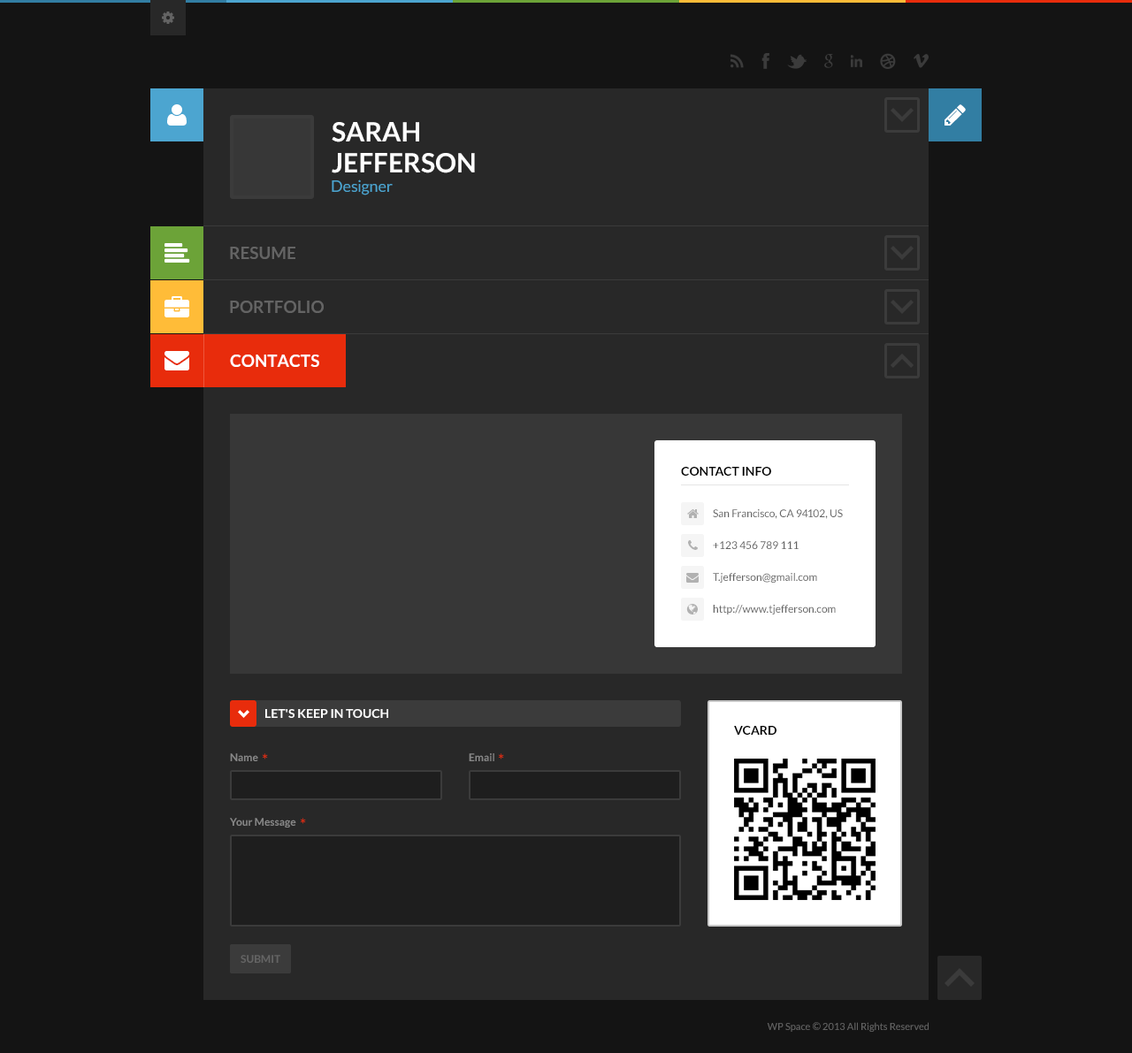
<style>
.page{position:relative;width:1132px;height:1053px;background:#141414}
.page>*{position:absolute;margin:0}
.t1{font:26.5px/31px "Lato-Bold";color:#ffffff;text-transform:uppercase}
.t2{font:15.9px "Lato-Regular";color:#4ca5d0}
.t3{font:16.8px "Lato-Bold";color:#646464;text-transform:uppercase}
.t4{font:16.8px "Lato-Bold";color:#ffffff;text-transform:uppercase}
.t5{font:12.4px "Lato-Bold";color:#000000;text-transform:uppercase}
.t6{font:10.6px/31.8px "Lato-Regular";color:#646464}
.t7{font:12.4px "Lato-Bold";color:#ffffff;text-transform:uppercase}
.t8{font:10.6px "Lato-Bold";color:#878787}
.t9{font:15.9px "Lato-Regular";color:#e82c0c}
.t10{font:10.6px "Lato-Bold";color:#646464;text-transform:uppercase}
.t11{font:9.7px "Lato-Regular";color:#646464}
.t12{font:10.6px "Lato-Regular";color:#646464}
</style>
<div class="page">
<p class="t1" style="left:332px;top:122px;width:143px;height:51px">Sarah<br>Jefferson</p>
<p class="t2" style="left:332px;top:180px;width:61px;height:15px">Designer</p>
<p class="t3" style="left:230px;top:247px;width:65px;height:12px">Resume</p>
<p class="t3" style="left:230px;top:301px;width:94px;height:12px">Portfolio</p>
<p class="t4" style="left:230px;top:355px;width:89px;height:12px">Contacts</p>
<p class="t5" style="left:681px;top:467px;width:90px;height:9px">Contact info</p>
<p class="t6" style="left:713px;top:509px;width:130px;height:106px">San Francisco, CA 94102, US<br>+123 456 789 111<br>T.jefferson@gmail.com<br>http://www.tjefferson.com</p>
<p class="t7" style="left:265px;top:709px;width:123px;height:9px">Let's keep in touch</p>
<p class="t5" style="left:734px;top:726px;width:43px;height:9px">Vcard</p>
<p class="t8" style="left:230px;top:754px;width:28px;height:7px">Name</p>
<p class="t9" style="left:263px;top:754px;width:5px;height:6px">*</p>
<p class="t8" style="left:469px;top:754px;width:25px;height:7px">Email</p>
<p class="t9" style="left:499px;top:754px;width:5px;height:6px">*</p>
<p class="t8" style="left:230px;top:818px;width:66px;height:10px">Your Message</p>
<p class="t9" style="left:301px;top:818px;width:5px;height:6px">*</p>
<p class="t10" style="left:241px;top:955px;width:39px;height:8px">Submit</p>
<p class="t10" style="left:241px;top:955px;width:39px;height:8px">Submit</p>
<p class="t11" style="left:767px;top:1022px;width:162px;height:10px">WP Space <span class="t12">©</span> 2013 All Rights Reserved</p>
</div>
